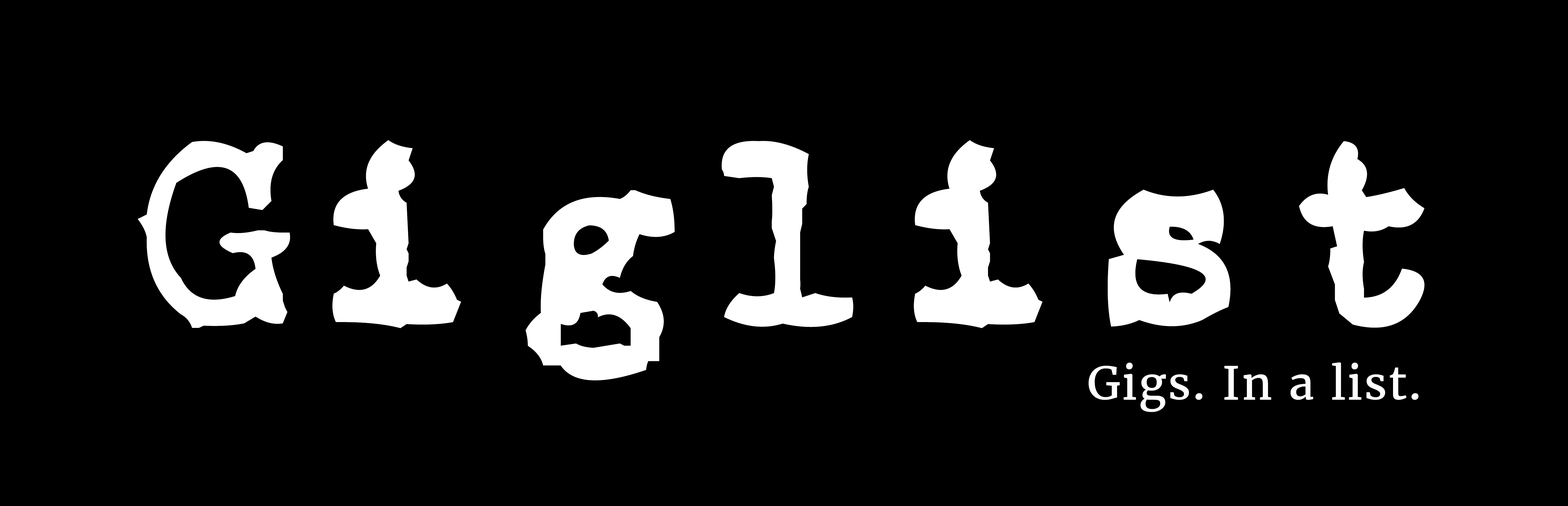
<style>
.page{position:relative;width:1568px;height:506px;background:#000000}
.page>*{position:absolute;margin:0}
.t1{font:252.9px "CarbonType";letter-spacing:0.03em;color:#ffffff}
.t2{font:45.5px "Merriweather-Regular";letter-spacing:0.03em;color:#ffffff}
</style>
<div class="page">
<p class="t1" style="left:138px;top:140px;width:1287px;height:240px">Giglist</p>
<p class="t2" style="left:1088px;top:362px;width:331px;height:50px">Gigs. In a list.</p>
</div>
